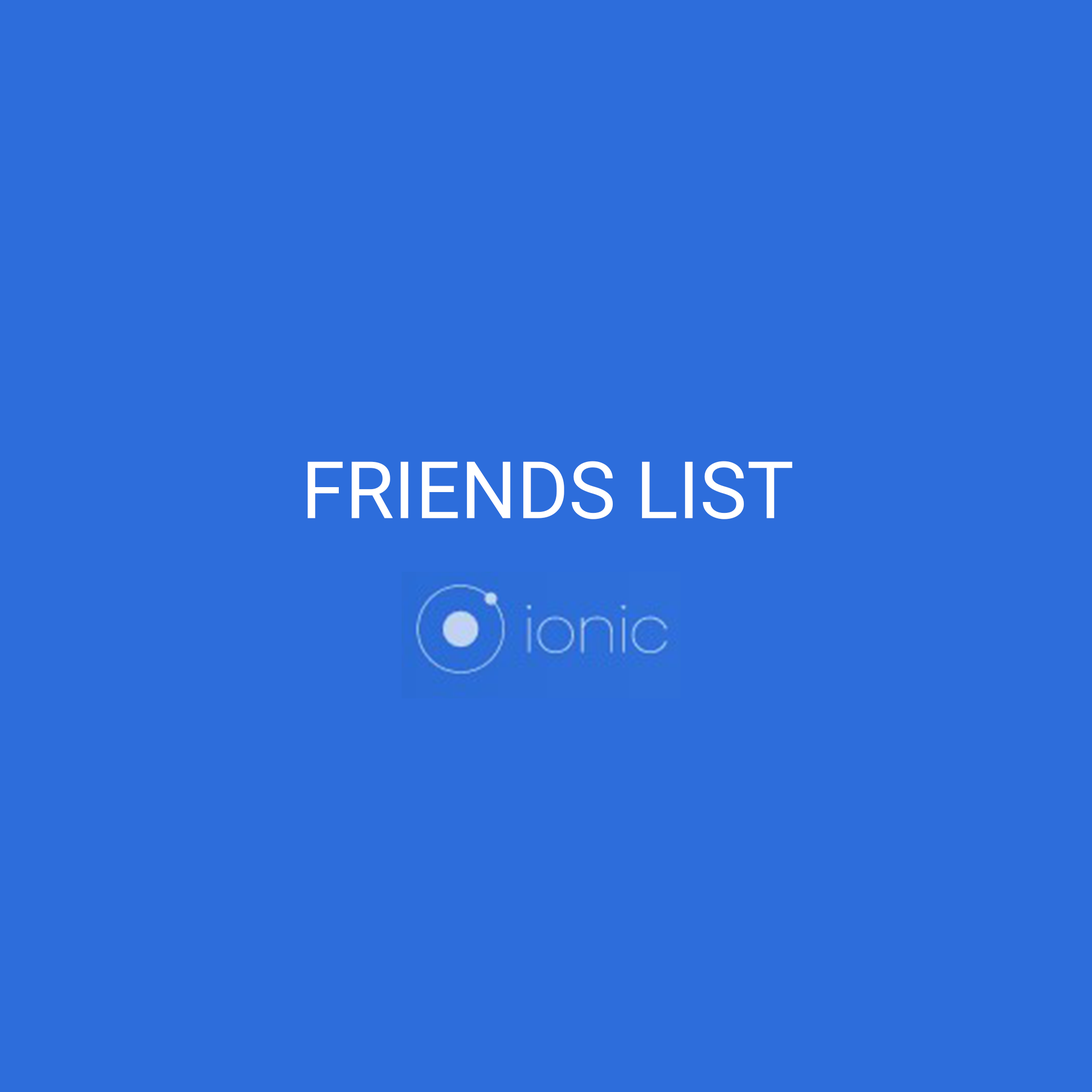
<style>
.page{position:relative;width:1092px;height:1092px;background:#2d6ddb}
.page>*{position:absolute;margin:0}
.t1{font:79px "Roboto-Regular";color:#ffffff}
</style>
<div class="page">
<p class="t1" style="left:308px;top:461px;width:484px;height:58px">FRIENDS LIST</p>
</div>
